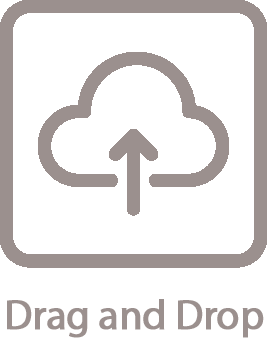
<style>
.page{position:relative;width:267px;height:350px;background:#ffffff}
.page>*{position:absolute;margin:0}
.t1{font:41.7px "MyriadPro-Regular";letter-spacing:-0.02em;color:#9b908e;font-weight:bold}
</style>
<div class="page">
<p class="t1" style="left:7px;top:299px;width:257px;height:39px">Drag and Drop</p>
</div>
